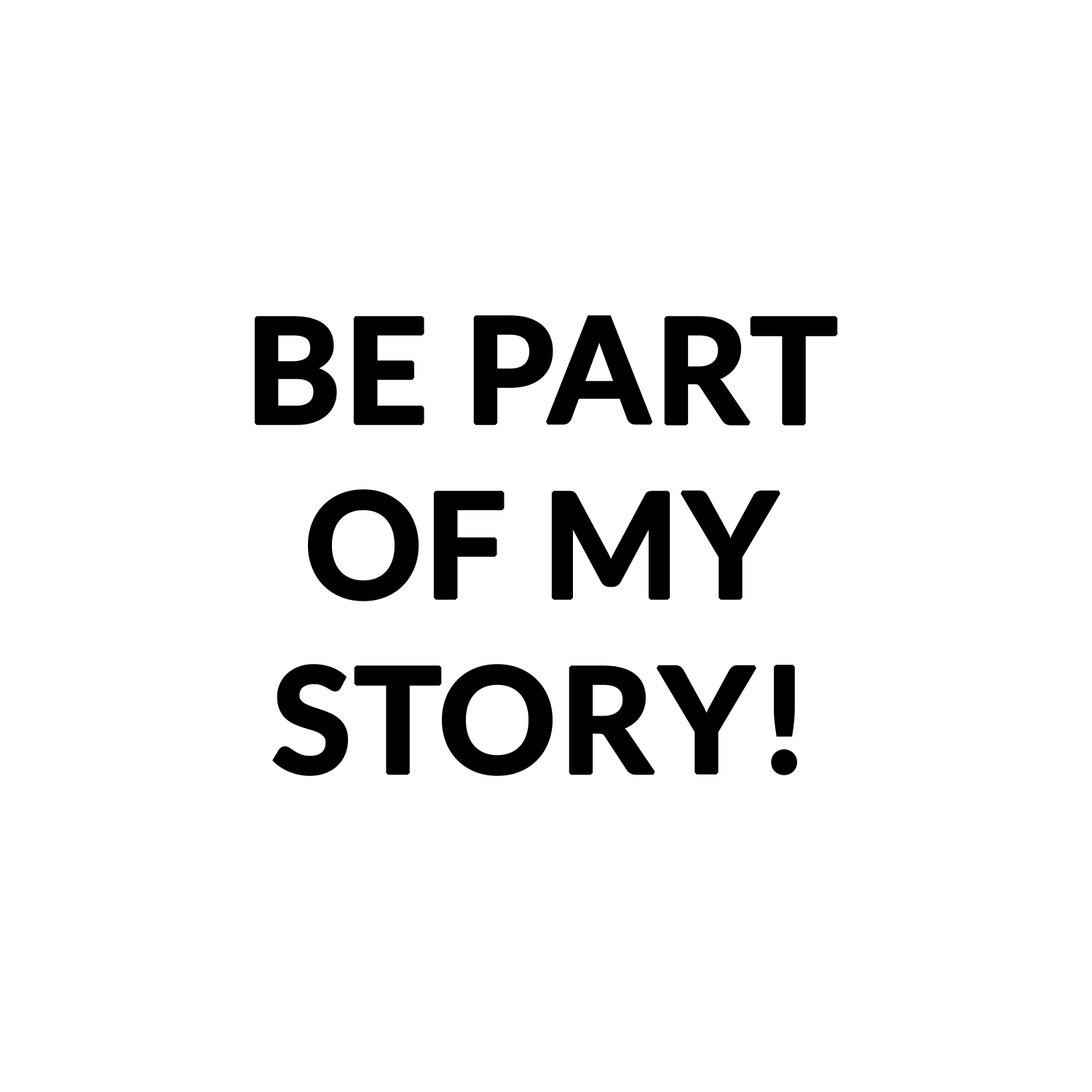
<style>
.page{position:relative;width:1092px;height:1092px;background:#ffffff}
.page>*{position:absolute;margin:0}
.t1{font:145.6px "Lato-Bold";color:#000000;font-weight:bold}
</style>
<div class="page">
<p class="t1" style="left:254px;top:315px;width:584px;height:461px;text-align:center">BE PART<br>OF MY<br>STORY!</p>
</div>
